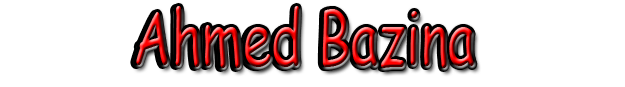
<style>
.page{position:relative;width:625px;height:87px;background:#ffffff}
.page>*{position:absolute;margin:0}
.t1{font:73.6px "ComicSansMS";scale:0.71 1}
.t2{font:73.6px "ComicSansMS";scale:0.72 1}
</style>
<div class="page">
<p class="t1" style="left:136px;top:6px;width:338px;height:62px">Ahmed Bazina</p>
<p class="t2" style="left:133px;top:7px;width:342px;height:62px">Ahmed Bazina</p>
</div>
